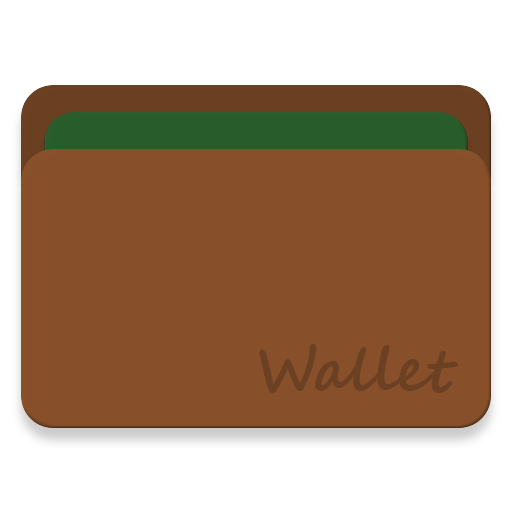
<style>
.page{position:relative;width:512px;height:512px;background:#87502b}
.page>*{position:absolute;margin:0}
.t1{font:60px "SegoeScript-Bold";color:#6c4022}
</style>
<div class="page">
<p class="t1" style="left:259px;top:344px;width:200px;height:50px">Wallet</p>
</div>
